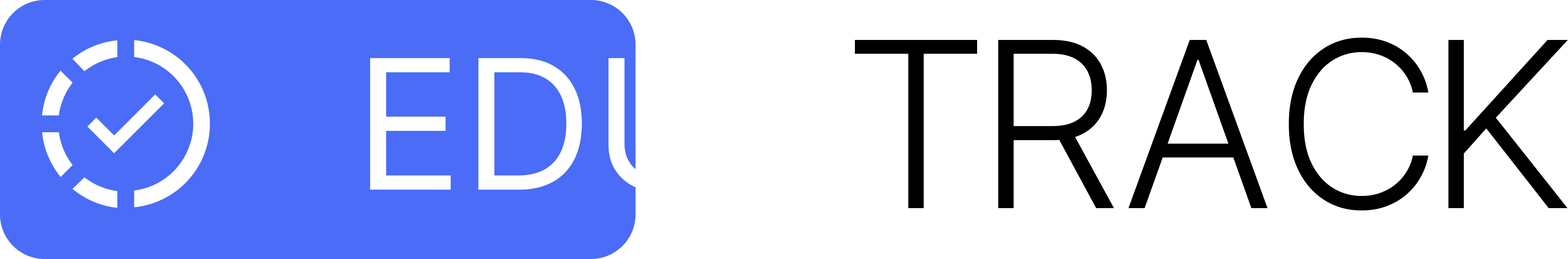
<style>
.page{position:relative;width:1568px;height:259px;background:#ffffff}
.page>*{position:absolute;margin:0}
.t1{font:231.6px "Inter-Light";color:#000000}
.t2{font:181.1px "Inter-Regular";color:#ffffff}
</style>
<div class="page">
<p class="t1" style="left:855px;top:40px;width:122px;height:168px">T</p>
<p class="t1" style="left:998px;top:40px;width:116px;height:168px">R</p>
<p class="t1" style="left:1128px;top:40px;width:140px;height:168px">A</p>
<p class="t1" style="left:1289px;top:37px;width:140px;height:174px">C</p>
<p class="t1" style="left:1448px;top:40px;width:120px;height:168px">K</p>
<p class="t2" style="left:370px;top:58px;width:341px;height:134px">EDU</p>
</div>
